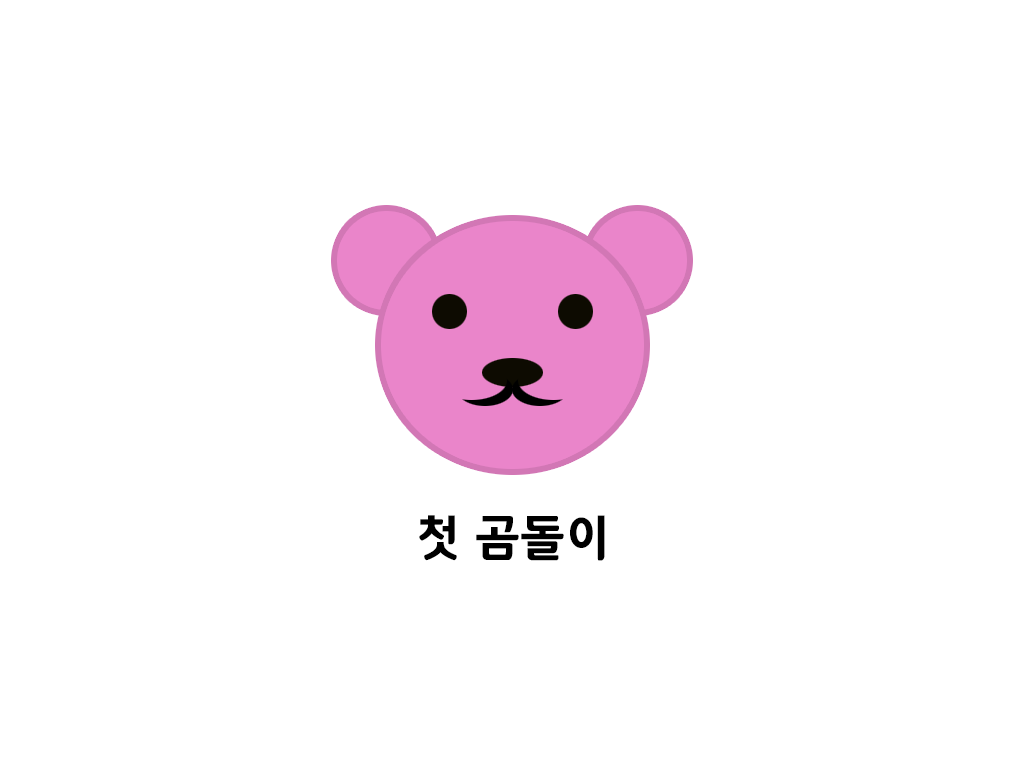
<style>
.page{position:relative;width:1024px;height:768px;background:#ffffff}
.page>*{position:absolute;margin:0}
.t1{font:50px "12LotteMartHappyBold";color:#000000}
</style>
<div class="page">
<p class="t1" style="left:419px;top:515px;width:186px;height:46px">첫 곰돌이</p>
</div>
